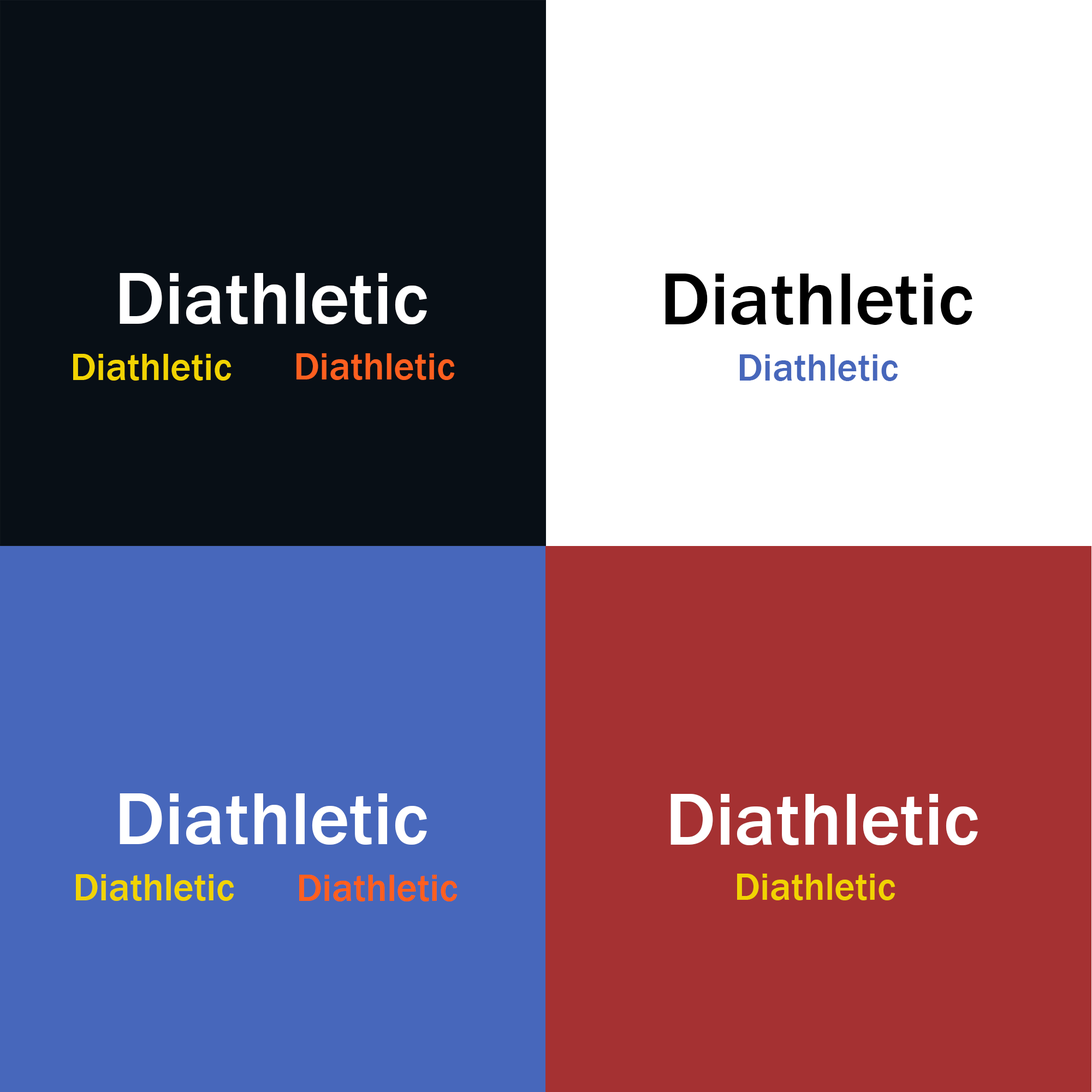
<style>
.page{position:relative;width:1092px;height:1092px;background:#ffffff}
.page>*{position:absolute;margin:0}
.t1{font:76.4px "FranklinGothic-Medium";color:#ffffff}
.t2{font:76.4px "FranklinGothic-Medium";color:#000000}
.t3{font:39.3px "FranklinGothic-Medium";color:#f1d302}
.t4{font:39.3px "FranklinGothic-Medium";color:#ff5f1f}
.t5{font:39.3px "FranklinGothic-Medium";color:#4767bb}
</style>
<div class="page">
<p class="t1" style="left:120px;top:273px;width:307px;height:51px">Diathletic</p>
<p class="t2" style="left:665px;top:274px;width:307px;height:51px">Diathletic</p>
<p class="t3" style="left:73px;top:354px;width:159px;height:27px">Diathletic</p>
<p class="t4" style="left:296px;top:353px;width:159px;height:27px">Diathletic</p>
<p class="t5" style="left:740px;top:354px;width:158px;height:27px">Diathletic</p>
<p class="t1" style="left:120px;top:793px;width:307px;height:52px">Diathletic</p>
<p class="t1" style="left:670px;top:794px;width:308px;height:51px">Diathletic</p>
<p class="t3" style="left:76px;top:874px;width:158px;height:27px">Diathletic</p>
<p class="t4" style="left:299px;top:875px;width:159px;height:26px">Diathletic</p>
<p class="t3" style="left:737px;top:874px;width:158px;height:26px">Diathletic</p>
</div>
